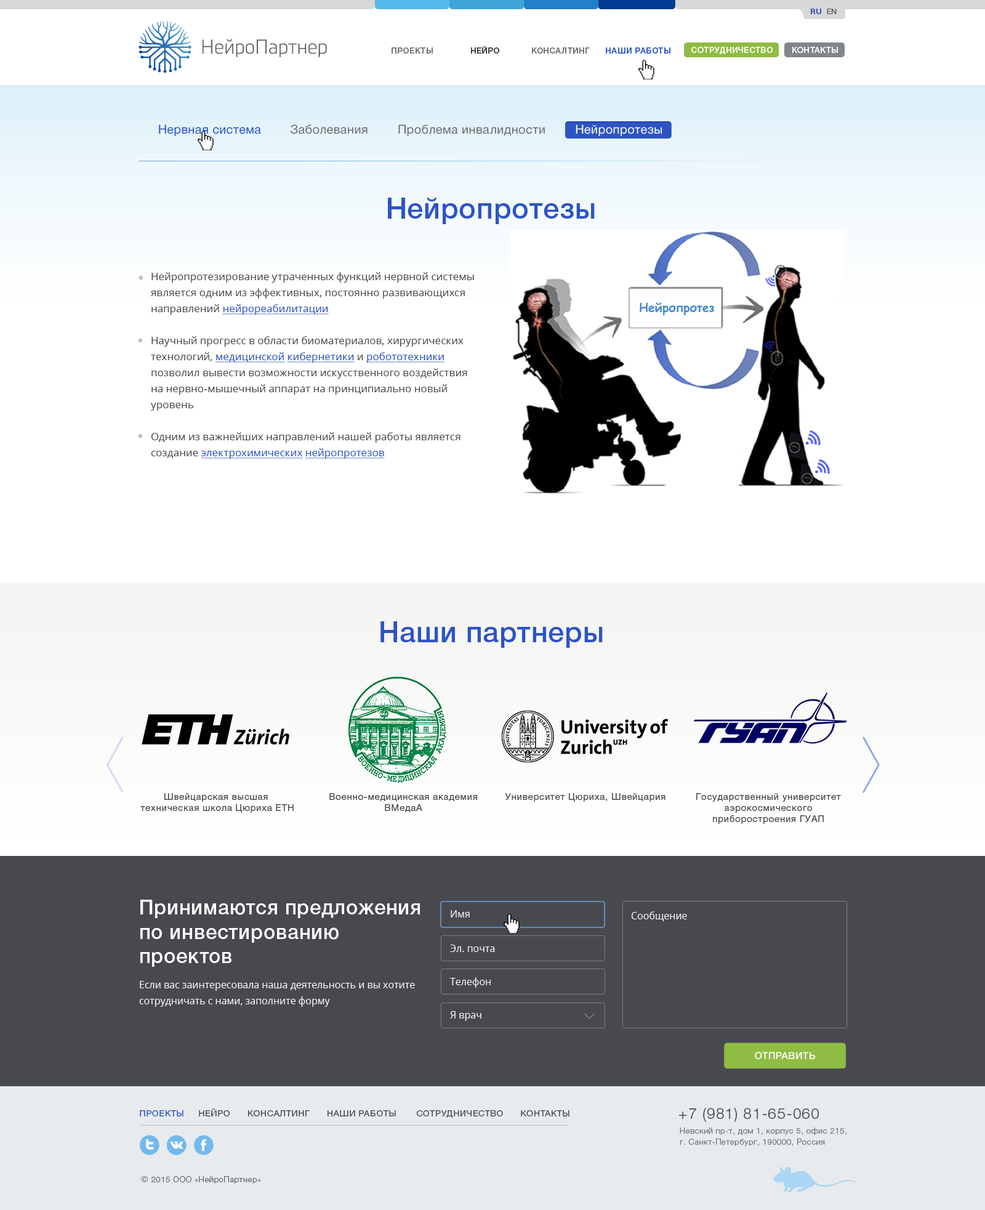
<style>
.page{position:relative;width:985px;height:1210px;background:#ffffff}
.page>*{position:absolute;margin:0}
.t1{font:7.4px "HelveticaNeueCyr-Bold";letter-spacing:0.05em;color:#2d54c2;text-transform:uppercase}
.t2{font:7.4px "HelveticaNeueCyr-Light";letter-spacing:0.05em;color:#4b4b4b;text-transform:uppercase}
.t3{font:8px "HelveticaNeueCyr-Medium";letter-spacing:0.05em;color:#2d54c2;text-transform:uppercase}
.t4{font:8px "HelveticaNeueCyr-Medium";letter-spacing:0.05em;color:#6d6d6d;text-transform:uppercase}
.t5{font:8px "HelveticaNeueCyr-Medium";letter-spacing:0.05em;color:#393939;text-transform:uppercase}
.t6{font:8px "HelveticaNeueCyr-Medium";letter-spacing:0.05em;color:#ffffff;text-transform:uppercase}
.t7{font:12.3px "HelveticaNeueCyr-Roman";letter-spacing:0.02em;color:#6d6d6d}
.t8{font:12.3px "HelveticaNeueCyr-Roman";letter-spacing:0.015em;color:#2d54c2}
.t9{font:12.3px "HelveticaNeueCyr-Roman";letter-spacing:0.02em;color:#ffffff}
.t10{font:28.9px "HelveticaNeueCyr-Medium";letter-spacing:0.02em;color:#2d54c2}
.t11{font:10.5px/16px "OpenSans";color:#4b4b4b}
.t12{font:10.5px/16px "OpenSans";color:#2d54c2;text-decoration:underline}
.t13{font:28.8px "HelveticaNeueCyr-Medium";letter-spacing:0.02em;color:#2d54c2}
.t14{font:9.2px "HelveticaNeueCyr-Roman";letter-spacing:0.05em;color:#4b4b4b}
.t15{font:20.3px "HelveticaNeueCyr-Medium";letter-spacing:0.02em;color:#ffffff}
.t16{font:9.9px "OpenSans";color:#ffffff}
.t17{font:9.9px/16px "OpenSans";color:#ffffff}
.t18{font:9.9px "HelveticaNeueCyr-Medium";letter-spacing:0.02em;color:#ffffff;text-transform:uppercase}
.t19{font:8.6px "HelveticaNeueCyr-Roman";letter-spacing:0.05em;color:#4b4b4b;text-transform:uppercase}
.t20{font:8.6px "HelveticaNeueCyr-Roman";letter-spacing:0.05em;color:#2d54c2;text-transform:uppercase}
.t21{font:15.1px "HelveticaNeueCyr-Light";letter-spacing:0.05em;color:#4b4b4b}
.t22{font:8px/11.1px "HelveticaNeueCyr-Light";letter-spacing:0.05em;color:#6f6f6f}
.t23{font:8px "HelveticaNeueCyr-Light";letter-spacing:0.05em;color:#636363}
.t24{font:8.6px "HelveticaNeueCyr-Roman";letter-spacing:0.05em;color:#636363}
</style>
<div class="page">
<p class="t1" style="left:811px;top:9px;width:26px;height:5px">Ru  <span class="t2">En</span></p>
<p class="t3" style="left:392px;top:46px;width:279px;height:8px"><span class="t4">Проекты             </span><span class="t5"> Нейро </span><span class="t4">           Консалтинг      </span>Наши работы</p>
<p class="t6" style="left:692px;top:47px;width:146px;height:8px">Сотрудничество       Контакты</p>
<p class="t7" style="left:159px;top:124px;width:503px;height:12px"><span class="t8">Нервная система        </span>Заболевания        Проблема инвалидности        <span class="t9">Нейропротезы</span></p>
<p class="t10" style="left:388px;top:198px;width:207px;height:26px">Нейропротезы</p>
<p class="t11" style="left:151px;top:272px;width:323px;height:187px">Нейропротезирование утраченных функций нервной системы является одним из эффективных, постоянно развивающихся направлений <span class="t12">нейрореабилитации<br></span><br>Научный прогресс в области биоматериалов, хирургических технологий, <span class="t12">медицинской кибернетики </span>и <span class="t12">робототехники</span> позволил вывести возможности искусственного воздействия на нервно-мышечный аппарат на принципиально новый уровень<br><br>Одним из важнейших направлений нашей работы является создание <span class="t12">электрохимических нейропротезов</span></p>
<p class="t13" style="left:381px;top:621px;width:222px;height:27px">Наши партнеры</p>
<p class="t14" style="left:140px;top:793px;width:154px;height:20px;text-align:center">Швейцарская высшая <br>техническая школа Цюриха ETH</p>
<p class="t14" style="left:329px;top:793px;width:148px;height:19px;text-align:center">Военно-медицинская академия<br>ВМедаА</p>
<p class="t14" style="left:505px;top:793px;width:161px;height:9px">Университет Цюриха, Швейцария</p>
<p class="t14" style="left:697px;top:793px;width:144px;height:31px;text-align:center">Государственный университет<br>аэрокосмического<br>приборостроения ГУАП</p>
<p class="t15" style="left:140px;top:900px;width:280px;height:67px">Принимаются предложения<br>по инвестированию<br>проектов</p>
<p class="t16" style="left:451px;top:910px;width:19px;height:8px">Имя</p>
<p class="t16" style="left:631px;top:911px;width:56px;height:10px">Сообщение</p>
<p class="t16" style="left:450px;top:945px;width:45px;height:7px">Эл. почта</p>
<p class="t16" style="left:450px;top:977px;width:41px;height:11px">Телефон</p>
<p class="t17" style="left:139px;top:981px;width:276px;height:26px">Если вас заинтересовала наша деятельность и вы хотите сотрудничать с нами, заполните форму</p>
<p class="t16" style="left:450px;top:1011px;width:32px;height:10px">Я врач</p>
<p class="t18" style="left:755px;top:1052px;width:60px;height:8px">отправить</p>
<p class="t19" style="left:140px;top:1108px;width:430px;height:10px"><span class="t20">Проекты</span>     Нейро      Консалтинг      Наши работы       Сотрудничество      Контакты</p>
<p class="t21" style="left:679px;top:1108px;width:140px;height:14px">+7 (981) 81-65-060</p>
<p class="t22" style="left:680px;top:1128px;width:167px;height:18px">Невский пр-т, дом 1, корпус 5, офис 215,<br>г. Санкт-Петербург, 190000, Россия</p>
<p class="t23" style="left:141px;top:1176px;width:120px;height:8px"><span class="t24">© </span>2015 ООО «НейроПартнер»</p>
</div>
